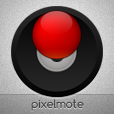
<style>
.page{position:relative;width:114px;height:114px}
.page>*{position:absolute;margin:0}
.t1{font:11px "Comfortaa-Regular";color:#404040}
</style>
<div class="page">
<p class="t1" style="left:31px;top:99px;width:53px;height:12px">pixelmote</p>
</div>
